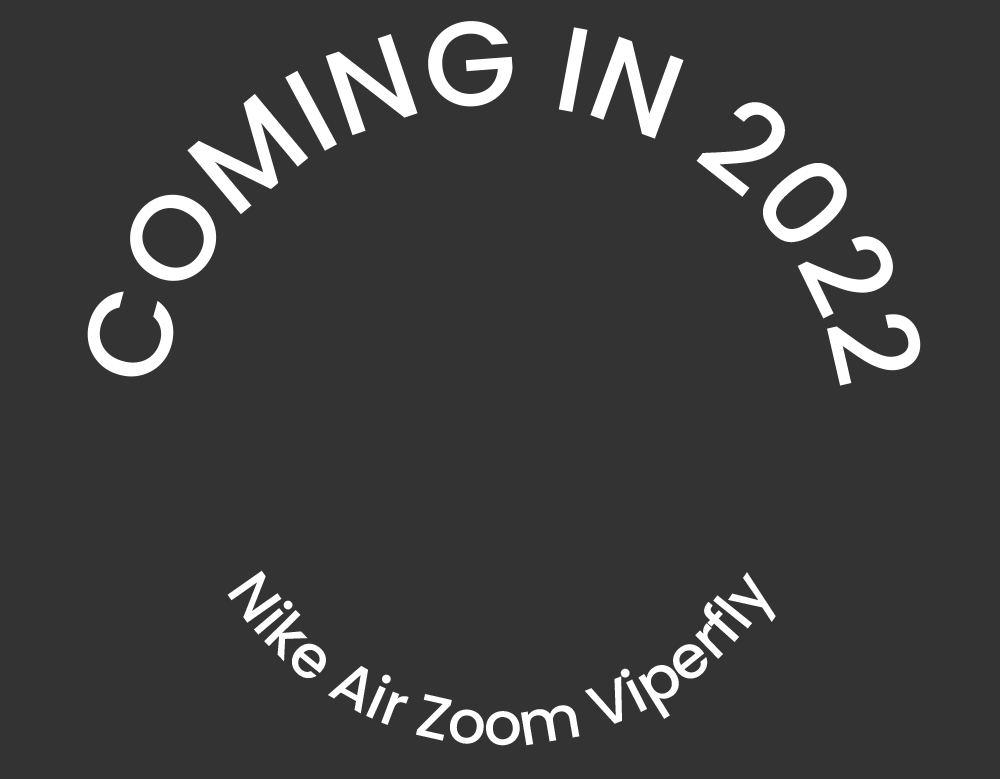
<style>
.page{position:relative;width:1000px;height:779px;background:#333333}
.page>*{position:absolute;margin:0}
.t1{font:120px "Poppins-Medium";color:#ffffff}
.t2{font:60px "Poppins-Medium";color:#ffffff}
</style>
<div class="page">
<p class="t1" style="left:87px;top:21px;width:834px;height:365px;text-align:center">COMING IN 2022</p>
<p class="t2" style="left:227px;top:570px;width:549px;height:176px;text-align:center">Nike Air Zoom Viperfly</p>
</div>
